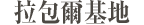
<style>
.page{position:relative;width:144px;height:25px;background:#ffffff}
.page>*{position:absolute;margin:0}
.t1{font:26px "RyuminPro-ExBold";color:#4c4843;scale:0.9 1}
</style>
<div class="page">
<p class="t1" style="left:14px;top:0px;width:116px;height:24px">拉包爾基地</p>
</div>
